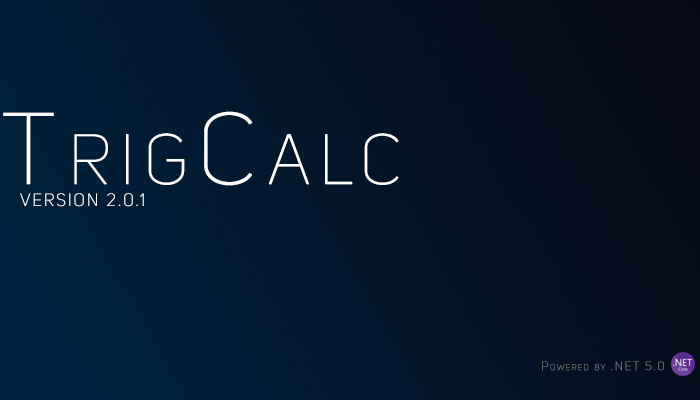
<style>
.page{position:relative;width:700px;height:400px}
.page>*{position:absolute;margin:0}
.t1{font:100px "UniSansThinCAPS";letter-spacing:0.1em;color:#ffffff;font-variant:small-caps;font-weight:bold}
.t2{font:17.2px "UniSansThinCAPS";letter-spacing:0.1em;color:#ffffff;font-weight:bold;scale:0.97 1}
.t3{font:11.8px "UniSansThinCAPS";letter-spacing:0.1em;color:#757575;font-variant:small-caps;font-weight:bold}
</style>
<div class="page">
<p class="t1" style="left:3px;top:111px;width:396px;height:75px">TrigCalc</p>
<p class="t2" style="left:20px;top:193px;width:124px;height:14px">Version 2.0.1</p>
<p class="t3" style="left:542px;top:361px;width:122px;height:10px">Powered by .NET 5.0</p>
</div>
